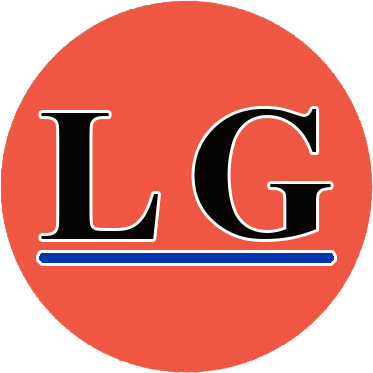
<style>
.page{position:relative;width:373px;height:373px;background:#ef5742}
.page>*{position:absolute;margin:0}
.t1{font:189.5px "TimesNewRomanPS-BoldMT";letter-spacing:0.15em;color:#070404}
.t2{font:186.6px "TimesNewRomanPS-BoldMT";letter-spacing:0.15em;color:#070404}
</style>
<div class="page">
<p class="t1" style="left:41px;top:113px;width:117px;height:126px">L</p>
<p class="t2" style="left:194px;top:109px;width:137px;height:130px">G</p>
</div>
